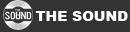
<style>
.page{position:relative;width:130px;height:32px;background:#333333}
.page>*{position:absolute;margin:0}
.t1{font:14px "Arial-Black";color:#ffffff}
</style>
<div class="page">
<p class="t1" style="left:35px;top:11px;width:93px;height:10px">THE SOUND</p>
</div>
